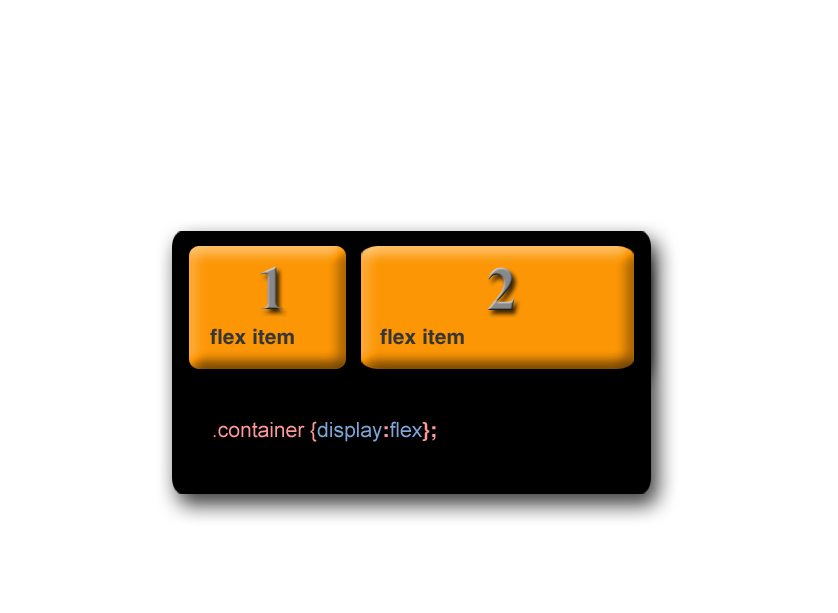
<style>
.page{position:relative;width:838px;height:613px;background:#ffffff}
.page>*{position:absolute;margin:0}
.t1{font:63px "TimesNewRomanPS-BoldMT";color:#898989}
.t2{font:63px "TimesNewRomanPS-BoldMT"}
.t3{font:21px "HelveticaLTStd-Bold";color:#363636}
.t4{font:21px "ArialMT";color:#ff9999}
.t5{font:21px "ArialMT";color:#7da7d9}
.t6{font:21px "HelveticaLTStd-Bold";color:#ff9999}
</style>
<div class="page">
<p class="t1" style="left:260px;top:266px;width:23px;height:43px">1</p>
<p class="t2" style="left:487px;top:267px;width:28px;height:43px">2</p>
<p class="t3" style="left:210px;top:328px;width:84px;height:17px">flex item</p>
<p class="t3" style="left:380px;top:328px;width:84px;height:17px">flex item</p>
<p class="t4" style="left:213px;top:421px;width:223px;height:21px">.container {<span class="t5">display</span><span class="t6">:</span><span class="t5">flex</span><span class="t6">};</span></p>
</div>
